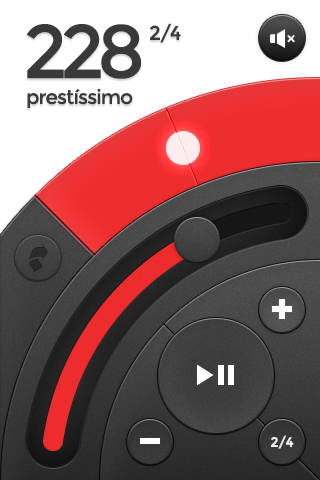
<style>
.page{position:relative;width:320px;height:480px;background:#ffffff}
.page>*{position:absolute;margin:0}
.t1{font:75.5px "Montserrat-Regular";letter-spacing:-0.1em;color:#393939;text-transform:uppercase}
.t2{font:20px "Montserrat-Regular";letter-spacing:-0.05em;color:#393939}
.t3{font:14px "Montserrat-Bold";letter-spacing:-0.05em;color:#ffffff}
</style>
<div class="page">
<p class="t1" style="left:26px;top:24px;width:116px;height:55px">228</p>
<p class="t2" style="left:150px;top:23px;width:31px;height:20px">2/4</p>
<p class="t2" style="left:27px;top:88px;width:106px;height:20px">prestíssimo</p>
<p class="t3" style="left:271px;top:435px;width:23px;height:14px;opacity:0.89">2/4</p>
</div>
